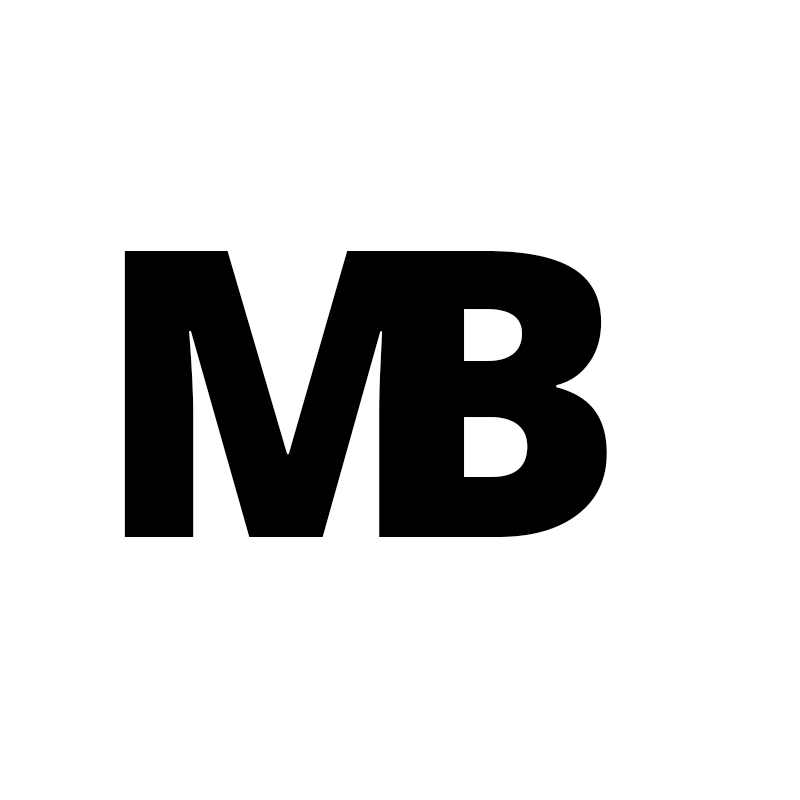
<style>
.page{position:relative;width:800px;height:800px;background:#ffffff}
.page>*{position:absolute;margin:0}
.t1{font:400px "OpenSans-ExtraBold";color:#000000}
</style>
<div class="page">
<p class="t1" style="left:124px;top:251px;width:327px;height:286px">M</p>
<p class="t1" style="left:386px;top:251px;width:221px;height:286px">B</p>
</div>
